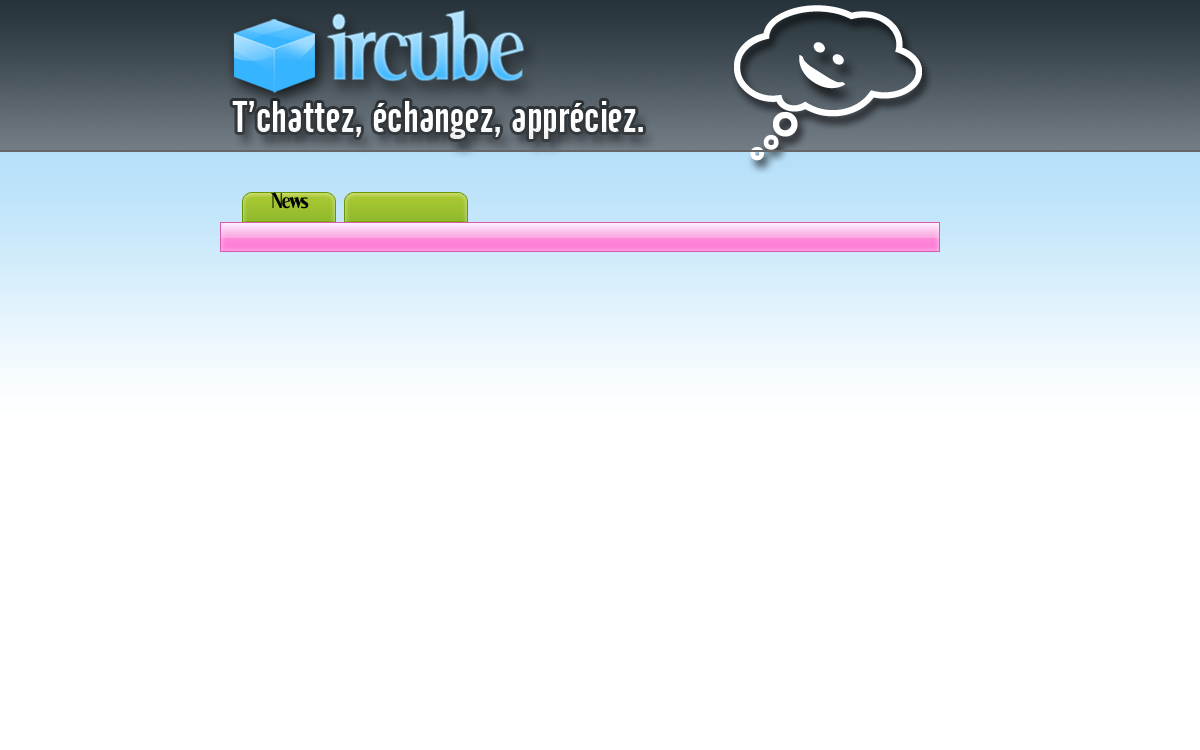
<style>
.page{position:relative;width:1200px;height:750px;background:#ffffff}
.page>*{position:absolute;margin:0}
.t1{font:106px "SerifNarrow"}
.t2{font:59px "BernardMT-Condensed";letter-spacing:0.14em;color:#fdfdfd}
.t3{font:43px "Cafeta";color:#ffffff}
.t4{font:24px "SerifNarrow";color:#000000}
</style>
<div class="page">
<p class="t1" style="left:326px;top:10px;width:198px;height:72px">ircube</p>
<p class="t2" style="left:799px;top:42px;width:46px;height:47px;rotate:123deg">:)</p>
<p class="t3" style="left:232px;top:101px;width:411px;height:38px">T’chattez, échangez, appréciez.</p>
<p class="t4" style="left:271px;top:192px;width:38px;height:17px">News</p>
</div>
